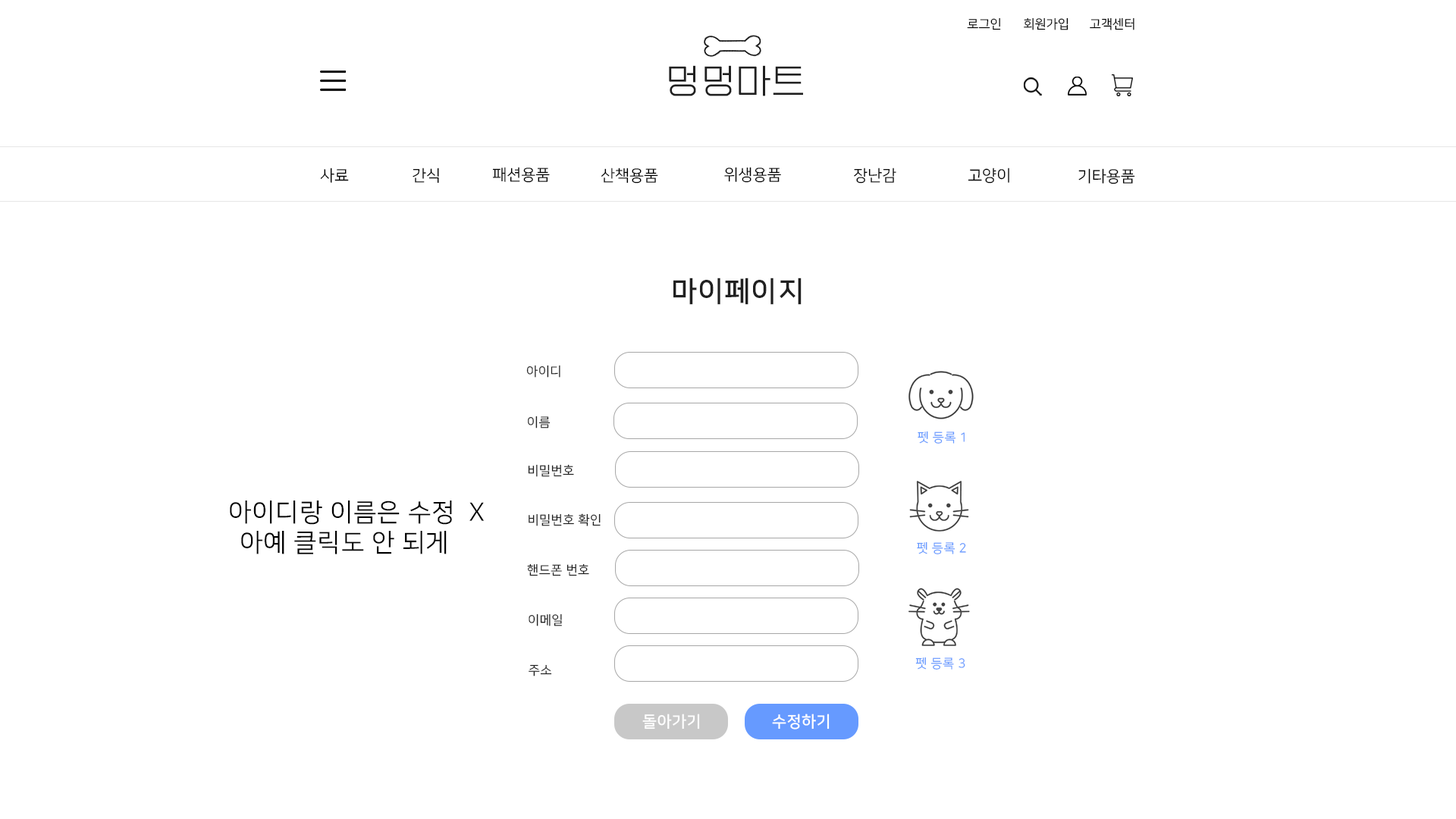
<style>
.page{position:relative;width:1456px;height:819px;background:#ffffff}
.page>*{position:absolute;margin:0}
.t1{font:12.6px "NanumSquareR";color:#000000}
.t2{font:34.8px "EF_watermelonSalad";letter-spacing:0.025em;color:#202020}
.t3{font:15.8px "NanumSquareR";color:#000000}
.t4{font:28.4px "NanumSquareB";letter-spacing:0.025em;color:#202020}
.t5{font:12.6px "NanumSquareR";letter-spacing:0.025em;color:#202020}
.t6{font:12.6px "NanumSquareR";letter-spacing:0.025em;color:#669aff}
.t7{font:25.3px "NanumSquareR";letter-spacing:0.025em;color:#000000}
.t8{font:15.8px "NanumSquareB";letter-spacing:0.025em;color:#ffffff}
</style>
<div class="page">
<p class="t1" style="left:967px;top:17px;width:34px;height:13px">로그인</p>
<p class="t1" style="left:1024px;top:17px;width:44px;height:13px">회원가입</p>
<p class="t1" style="left:1090px;top:17px;width:44px;height:13px">고객센터</p>
<p class="t2" style="left:669px;top:65px;width:134px;height:31px">멍멍마트</p>
<p class="t3" style="left:320px;top:168px;width:29px;height:15px">사료</p>
<p class="t3" style="left:413px;top:168px;width:26px;height:16px">간식</p>
<p class="t3" style="left:492px;top:167px;width:58px;height:16px">패션용품</p>
<p class="t3" style="left:601px;top:168px;width:57px;height:16px">산책용품</p>
<p class="t3" style="left:724px;top:167px;width:57px;height:16px">위생용품</p>
<p class="t3" style="left:854px;top:168px;width:42px;height:16px">장난감</p>
<p class="t3" style="left:968px;top:168px;width:41px;height:16px">고양이</p>
<p class="t3" style="left:1078px;top:168px;width:57px;height:16px">기타용품</p>
<p class="t4" style="left:673px;top:278px;width:129px;height:27px">마이페이지</p>
<p class="t5" style="left:526px;top:365px;width:34px;height:13px">아이디</p>
<p class="t5" style="left:528px;top:416px;width:23px;height:12px">이름</p>
<p class="t6" style="left:918px;top:431px;width:47px;height:13px">펫 등록 1</p>
<p class="t5" style="left:528px;top:464px;width:46px;height:13px">비밀번호</p>
<p class="t7" style="left:230px;top:500px;width:254px;height:54px;text-align:center">아이디랑 이름은 수정  X<br>아예 클릭도 안 되게</p>
<p class="t5" style="left:529px;top:513px;width:72px;height:13px">비밀번호 확인</p>
<p class="t6" style="left:917px;top:541px;width:49px;height:13px">펫 등록 2</p>
<p class="t5" style="left:527px;top:563px;width:62px;height:13px">핸드폰 번호</p>
<p class="t5" style="left:529px;top:613px;width:33px;height:13px">이메일</p>
<p class="t5" style="left:529px;top:664px;width:23px;height:12px">주소</p>
<p class="t6" style="left:915px;top:657px;width:50px;height:13px">펫 등록 3</p>
<p class="t8" style="left:642px;top:714px;width:58px;height:16px">돌아가기</p>
<p class="t8" style="left:772px;top:714px;width:58px;height:16px">수정하기</p>
</div>
